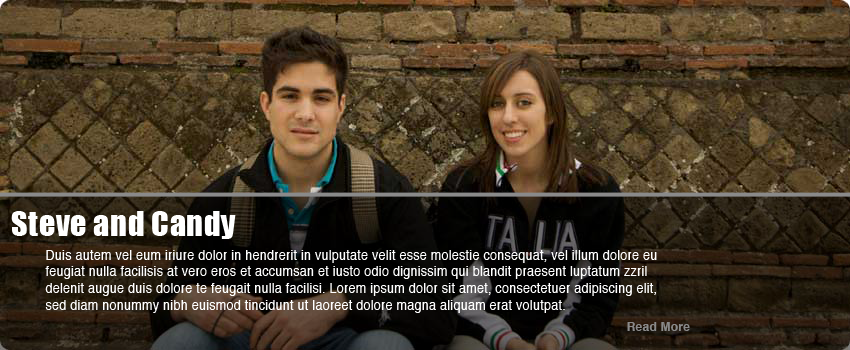
<style>
.page{position:relative;width:850px;height:350px}
.page>*{position:absolute;margin:0}
.t1{font:32px "Impact";letter-spacing:0.02em;color:#ffffff}
.t2{font:14px "Helvetica";letter-spacing:0.02em;color:#ffffff;scale:0.9 1}
.t3{font:12px "Helvetica-Bold";letter-spacing:0.02em;color:#8a8a8a}
</style>
<div class="page">
<p class="t1" style="left:11px;top:211px;width:225px;height:28px">Steve and Candy</p>
<p class="t2" style="left:45px;top:250px;width:612px;height:63px">Duis autem vel eum iriure dolor in hendrerit in vulputate velit esse molestie consequat, vel illum dolore eu feugiat nulla facilisis at vero eros et accumsan et iusto odio dignissim qui blandit praesent luptatum zzril delenit augue duis dolore te feugait nulla facilisi. Lorem ipsum dolor sit amet, consectetuer adipiscing elit, sed diam nonummy nibh euismod tincidunt ut laoreet dolore magna aliquam erat volutpat.</p>
<p class="t3" style="left:627px;top:322px;width:63px;height:9px">Read More</p>
</div>
